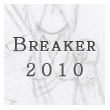
<style>
.page{position:relative;width:110px;height:110px}
.page>*{position:absolute;margin:0}
.t1{font:19px/20px "AdobeMyungjoStd-Medium";letter-spacing:0.1em;color:#4c4c4c;font-variant:small-caps;font-weight:bold}
.t2{font:10px/20px "AdobeMyungjoStd-Medium";letter-spacing:0.1em;color:#4c4c4c;font-weight:bold}
.t3{font:17px/25px "AdobeMyungjoStd-Medium";letter-spacing:0.28em;color:#4c4c4c;font-weight:bold}
</style>
<div class="page">
<p class="t1" style="left:13px;top:37px;width:83px;height:40px;text-align:center"><span class="t2"><br></span><br>Breaker<br><span class="t3">2010</span></p>
</div>
